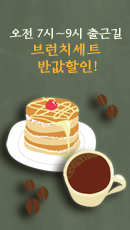
<style>
.page{position:relative;width:130px;height:230px}
.page>*{position:absolute;margin:0}
.t1{font:12px "TSTJJWanSunR";color:#f8fae5}
.t2{font:14px "TSTJJWanSunR";color:#ffb431}
</style>
<div class="page">
<p class="t1" style="left:10px;top:27px;width:112px;height:47px;text-align:center">오전 7시~9시 출근길 <br><span class="t2">브런치세트 <br>반값할인!</span></p>
</div>
